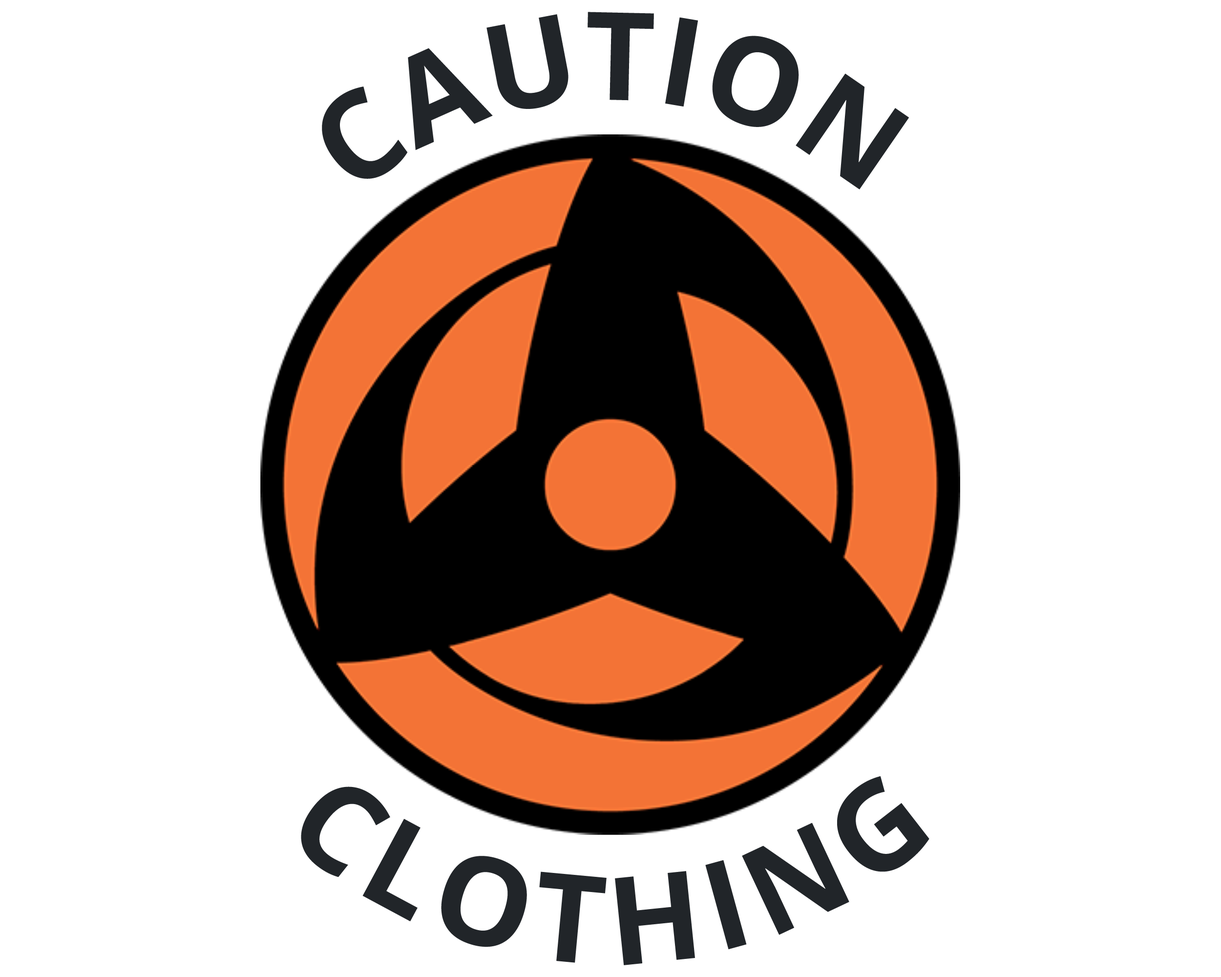
<style>
.page{position:relative;width:1221px;height:977px;background:#ffffff}
.page>*{position:absolute;margin:0}
.t1{font:122.1px "OpenSans-Bold";color:#212529}
.t2{font:122.1px "OpenSans-Bold";letter-spacing:0.1em;color:#212529}
</style>
<div class="page">
<p class="t1" style="left:322px;top:12px;width:587px;height:177px">CAUTION</p>
<p class="t2" style="left:301px;top:776px;width:628px;height:189px">CLOTHING</p>
</div>
